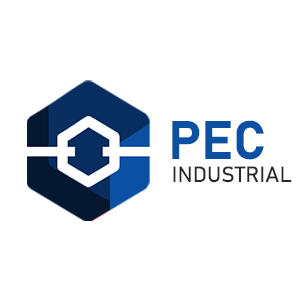
<style>
.page{position:relative;width:300px;height:300px;background:#ffffff}
.page>*{position:absolute;margin:0}
.t1{font:53.4px "Bahnschrift-Bold";color:#0c50a4}
.t2{font:21.8px "Bahnschrift";color:#282828}
</style>
<div class="page">
<p class="t1" style="left:172px;top:120px;width:92px;height:40px">PEC</p>
<p class="t2" style="left:173px;top:166px;width:119px;height:17px">INDUSTRIAL</p>
</div>
